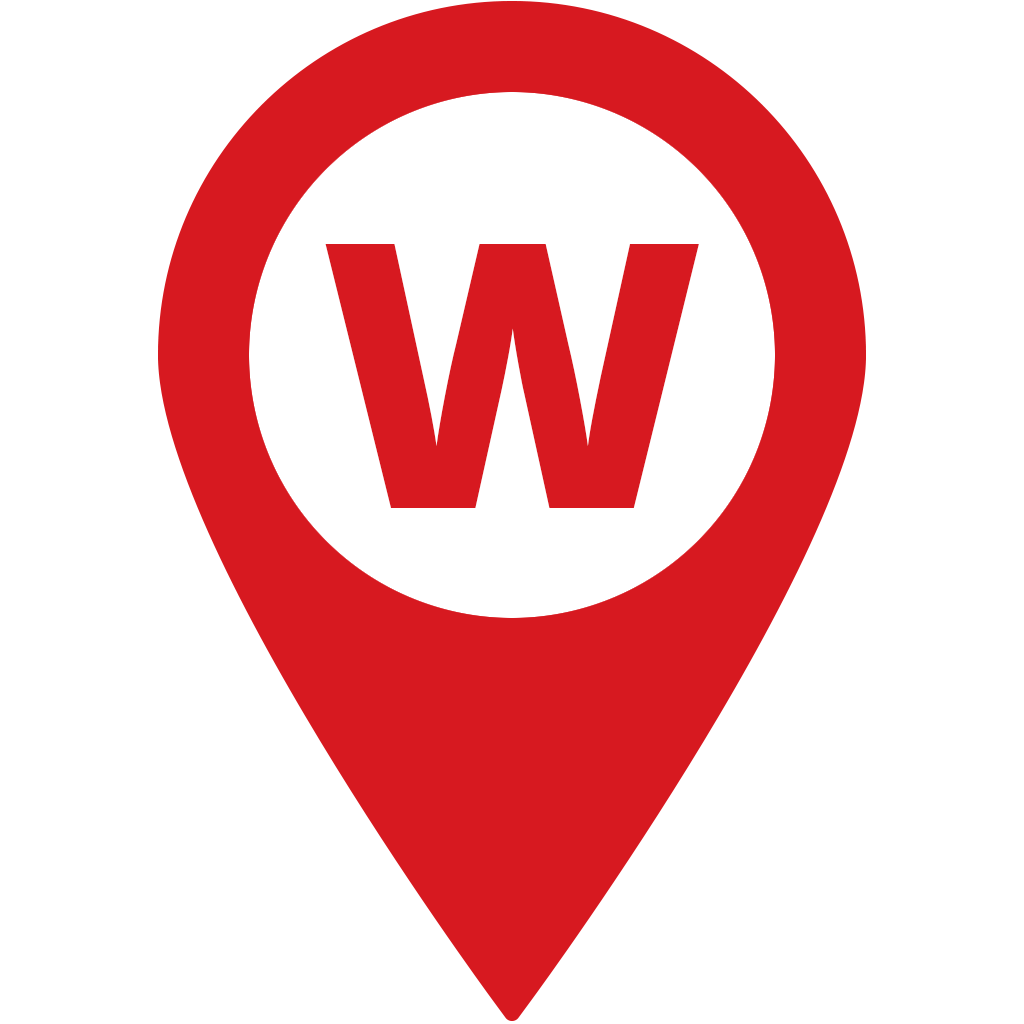
<style>
.page{position:relative;width:1024px;height:1024px;background:#ffffff}
.page>*{position:absolute;margin:0}
.t1{font:370px "OpenSans-Extrabold";color:#d71920}
</style>
<div class="page">
<p class="t1" style="left:325px;top:244px;width:374px;height:264px">W</p>
</div>
